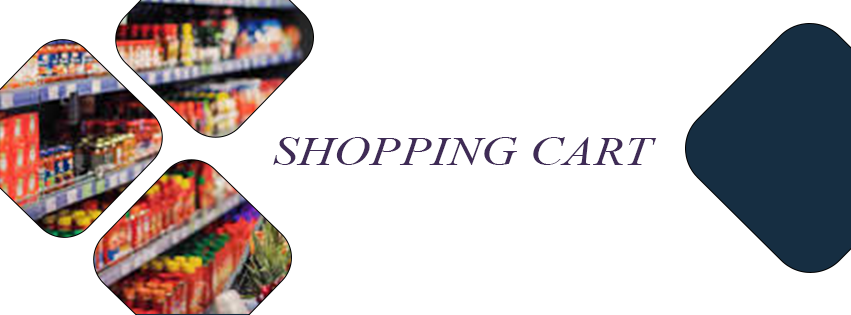
<style>
.page{position:relative;width:851px;height:315px;background:#ffffff}
.page>*{position:absolute;margin:0}
.t1{font:40.5px "TimesNewRomanPS-ItalicMT";color:#3f2b56;scale:1.24 1}
</style>
<div class="page">
<p class="t1" style="left:273px;top:137px;width:384px;height:28px">SHOPPING CART</p>
</div>
